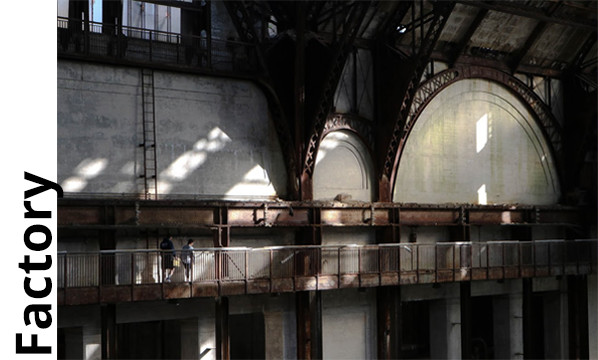
<style>
.page{position:relative;width:598px;height:360px}
.page>*{position:absolute;margin:0}
.t1{font:50px "OpenSans-Bold";color:#000000}
</style>
<div class="page">
<p class="t1" style="left:15px;top:171px;width:49px;height:183px;rotate:-90deg">Factory</p>
</div>
